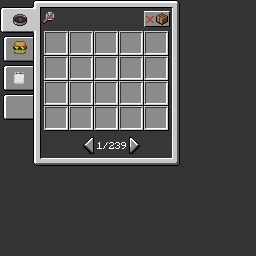
<style>
.page{position:relative;width:256px;height:256px;background:#333333}
.page>*{position:absolute;margin:0}
.t1{font:10px "Minecraft-Regular";color:#ffffff}
</style>
<div class="page">
<p class="t1" style="left:97px;top:142px;width:29px;height:7px">1/239</p>
</div>
